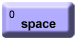
<style>
.page{position:relative;width:80px;height:40px;background:#b2acff}
.page>*{position:absolute;margin:0}
.t1{font:10.4px "ArialMT";letter-spacing:-0.01em;color:#000000}
.t2{font:12.5px "Arial-BoldMT";letter-spacing:-0.01em;color:#000000}
</style>
<div class="page">
<p class="t1" style="left:9px;top:10px;width:6px;height:8px">0</p>
<p class="t2" style="left:21px;top:21px;width:35px;height:10px">space</p>
</div>
